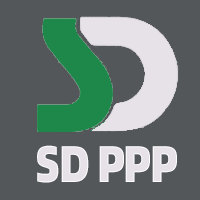
<style>
.page{position:relative;width:200px;height:200px;background:#54575a}
.page>*{position:absolute;margin:0}
.t1{font:51.5px "Alibaba-PuHuiTi-H";letter-spacing:-0.05em;color:#e6e2e7;scale:0.84 1}
</style>
<div class="page">
<p class="t1" style="left:37px;top:145px;width:140px;height:38px">SD PPP</p>
</div>
